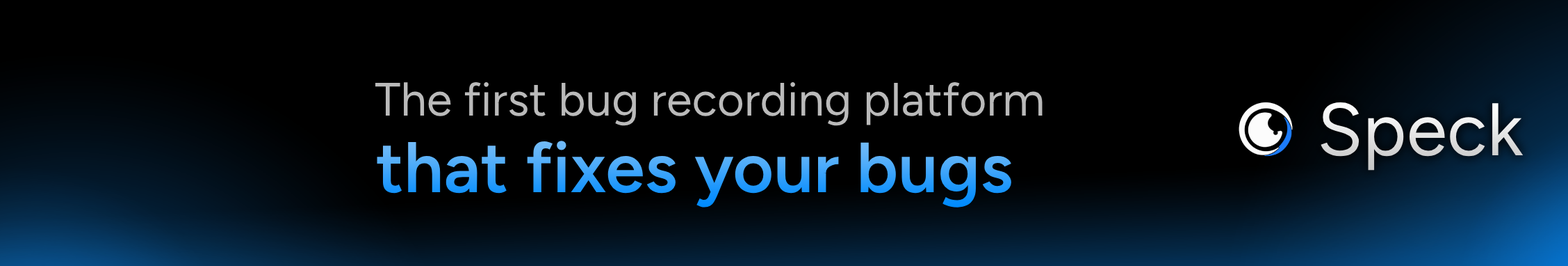
<style>
.page{position:relative;width:1568px;height:266px;background:#000000}
.page>*{position:absolute;margin:0}
.t1{font:46.7px "Figtree-Regular";color:#bababa}
.t2{font:74.2px "Figtree-Regular";color:#e3e3e3}
.t3{font:70.7px "Figtree-SemiBold"}
</style>
<div class="page">
<p class="t1" style="left:375px;top:82px;width:668px;height:44px">The first bug recording platform</p>
<p class="t2" style="left:1321px;top:102px;width:203px;height:68px">Speck</p>
<p class="t3" style="left:377px;top:140px;width:634px;height:67px">that fixes your bugs</p>
</div>
